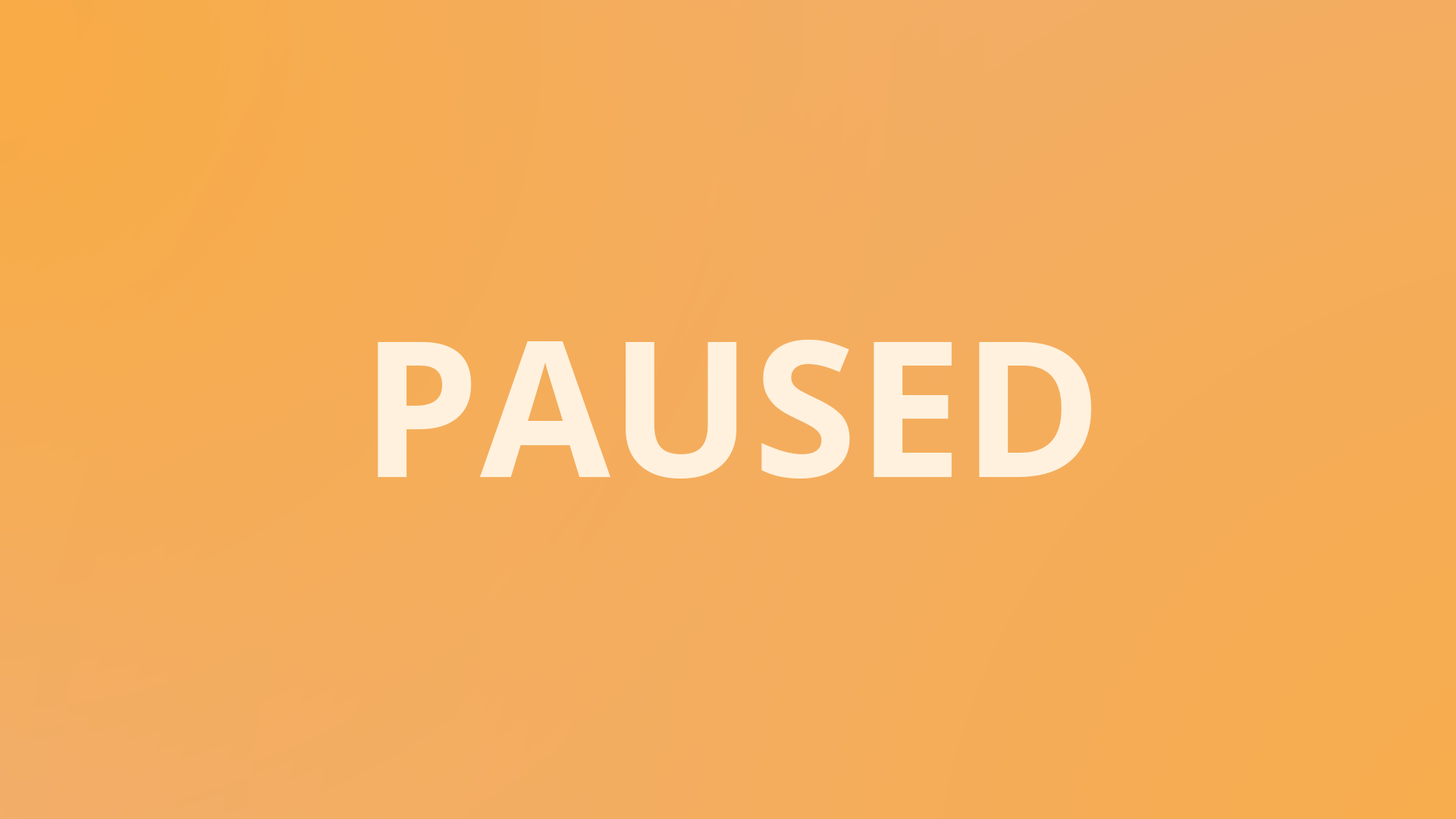
<style>
.page{position:relative;width:1456px;height:819px}
.page>*{position:absolute;margin:0}
.t1{font:189.6px "OpenSans-Bold";color:#fff1dd}
.t2{font:49px "OpenSans-Bold";color:#8f8b8b}
</style>
<div class="page">
<p class="t1" style="left:378px;top:340px;width:713px;height:139px"><span class="t2"><br><br><br></span><br>PAUSED</p>
</div>
